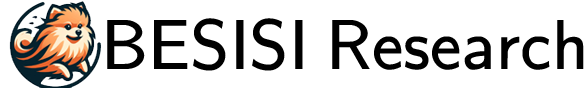
<style>
.page{position:relative;width:588px;height:88px;background:#ffffff}
.page>*{position:absolute;margin:0}
.t1{font:70.8px "KaTeX_SansSerif-Regular";color:#000000}
</style>
<div class="page">
<p class="t1" style="left:107px;top:18px;width:477px;height:53px">BESISI Research</p>
</div>
